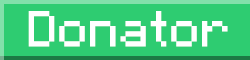
<style>
.page{position:relative;width:250px;height:60px;background:#2ecc71}
.page>*{position:absolute;margin:0}
.t1{font:40.4px "Minecraft";letter-spacing:0.02em;color:#ffffff}
</style>
<div class="page">
<p class="t1" style="left:28px;top:11px;width:200px;height:36px">Donator</p>
</div>
